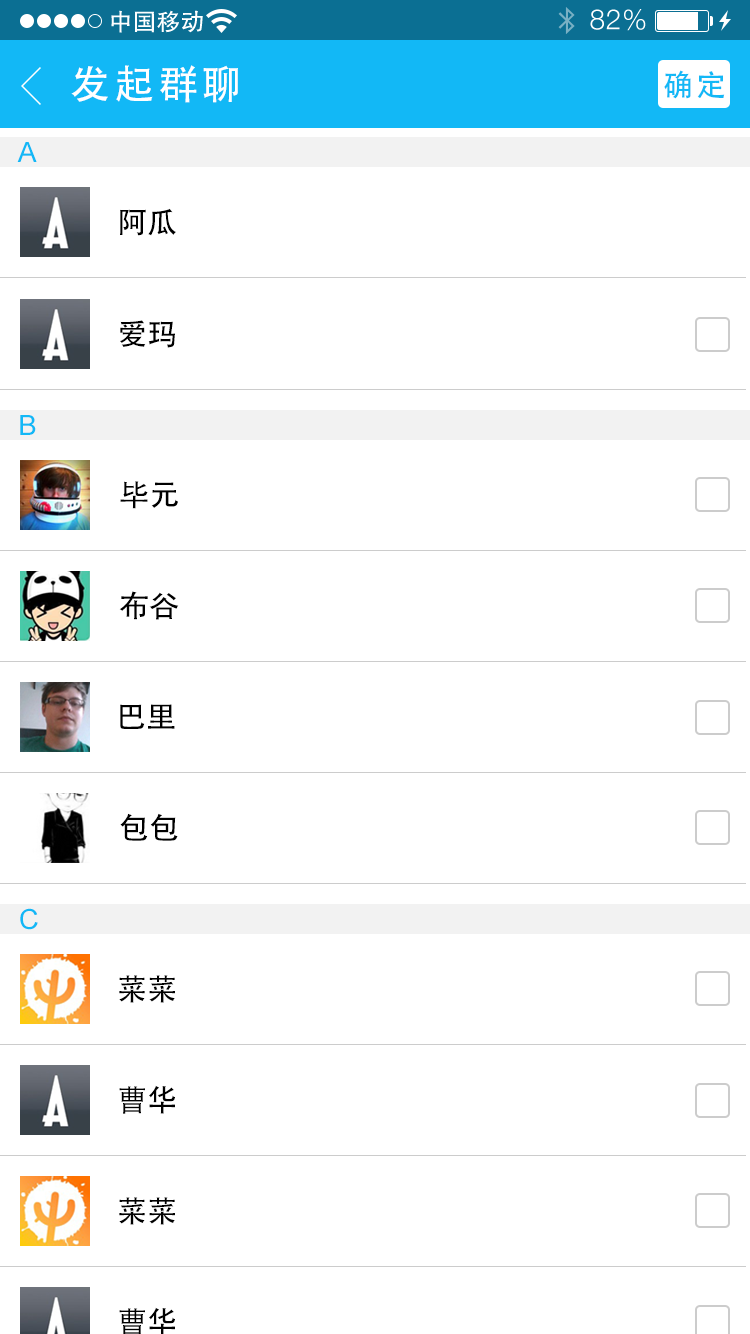
<style>
.page{position:relative;width:750px;height:1334px;background:#ffffff}
.page>*{position:absolute;margin:0}
.t1{font:40px "AdobeHeitiStd-Regular";letter-spacing:0.104em;color:#ffffff}
.t2{font:30px "AdobeHeitiStd-Regular";letter-spacing:0.104em;color:#12b8f6}
.t3{font:28px "ArialMT";letter-spacing:0.01em;color:#12b8f6}
.t4{font:30px "AdobeHeitiStd-Regular";letter-spacing:0.01em;color:#000000}
</style>
<div class="page">
<p class="t1" style="left:71px;top:65px;width:167px;height:38px">发起群聊</p>
<p class="t2" style="left:664px;top:70px;width:61px;height:29px">确定</p>
<p class="t3" style="left:17px;top:142px;width:20px;height:20px">A</p>
<p class="t4" style="left:120px;top:208px;width:56px;height:28px">阿瓜</p>
<p class="t4" style="left:120px;top:320px;width:55px;height:28px">爱玛</p>
<p class="t3" style="left:20px;top:415px;width:16px;height:20px">B</p>
<p class="t4" style="left:120px;top:481px;width:58px;height:28px">毕元</p>
<p class="t4" style="left:119px;top:591px;width:60px;height:29px">布谷</p>
<p class="t4" style="left:120px;top:704px;width:55px;height:25px">巴里</p>
<p class="t4" style="left:120px;top:813px;width:58px;height:28px">包包</p>
<p class="t3" style="left:20px;top:908px;width:18px;height:22px">C</p>
<p class="t4" style="left:119px;top:975px;width:56px;height:28px">菜菜</p>
<p class="t4" style="left:119px;top:1085px;width:56px;height:29px">曹华</p>
<p class="t4" style="left:119px;top:1197px;width:56px;height:28px">菜菜</p>
<p class="t4" style="left:119px;top:1307px;width:56px;height:29px">曹华</p>
</div>
